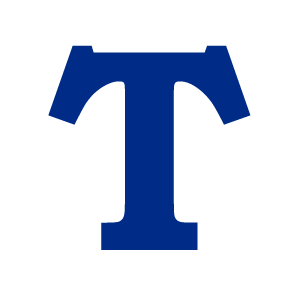
<style>
.page{position:relative;width:300px;height:300px;background:#ffffff}
.page>*{position:absolute;margin:0}
.t1{font:290px "BookmanOldStyle-Bold";color:#002b87}
</style>
<div class="page">
<p class="t1" style="left:48px;top:45px;width:203px;height:205px">T</p>
</div>
